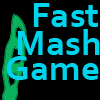
<style>
.page{position:relative;width:100px;height:100px;background:#000000}
.page>*{position:absolute;margin:0}
.t1{font:37.3px "Corbel-Bold";color:#00d4ec}
</style>
<div class="page">
<p class="t1" style="left:33px;top:3px;width:65px;height:24px">Fast</p>
<p class="t1" style="left:17px;top:29px;width:83px;height:26px">Mash</p>
<p class="t1" style="left:6px;top:56px;width:93px;height:24px">Game</p>
</div>
